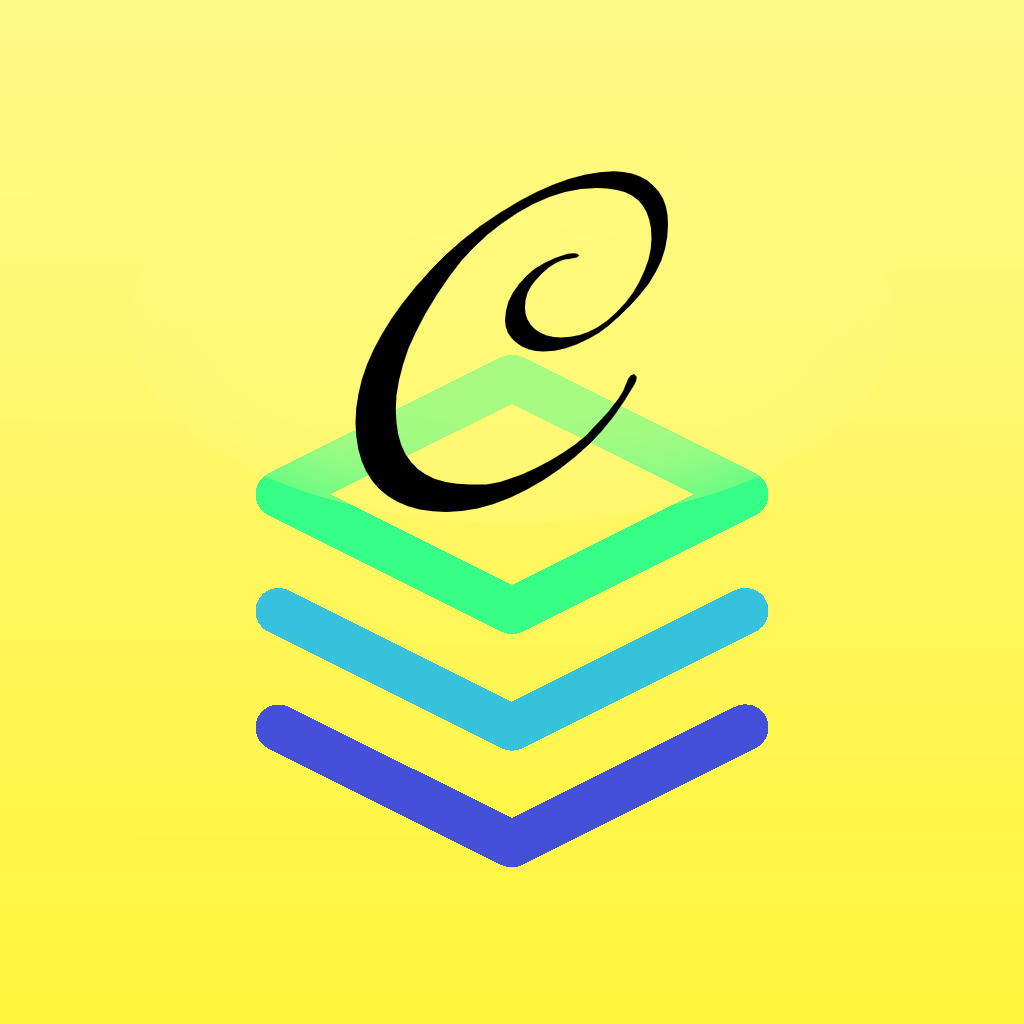
<style>
.page{position:relative;width:1024px;height:1024px}
.page>*{position:absolute;margin:0}
.t1{font:639px "Ballantines-Regular";color:#000000}
</style>
<div class="page">
<p class="t1" style="left:355px;top:171px;width:314px;height:341px">C</p>
</div>
